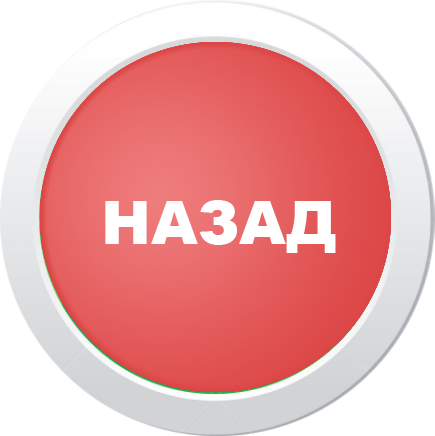
<style>
.page{position:relative;width:435px;height:436px;background:#ffffff}
.page>*{position:absolute;margin:0}
.t1{font:60px "Arial-Black";color:#ffffff}
</style>
<div class="page">
<p class="t1" style="left:105px;top:200px;width:231px;height:53px">НАЗАД</p>
</div>
